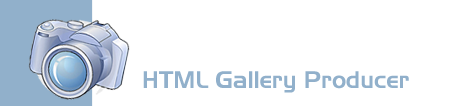
<style>
.page{position:relative;width:453px;height:106px;background:#ffffff}
.page>*{position:absolute;margin:0}
.t1{font:24px "Slicker";color:#91b0cb}
</style>
<div class="page">
<p class="t1" style="left:143px;top:71px;width:266px;height:22px">HTML Gallery Producer</p>
</div>
